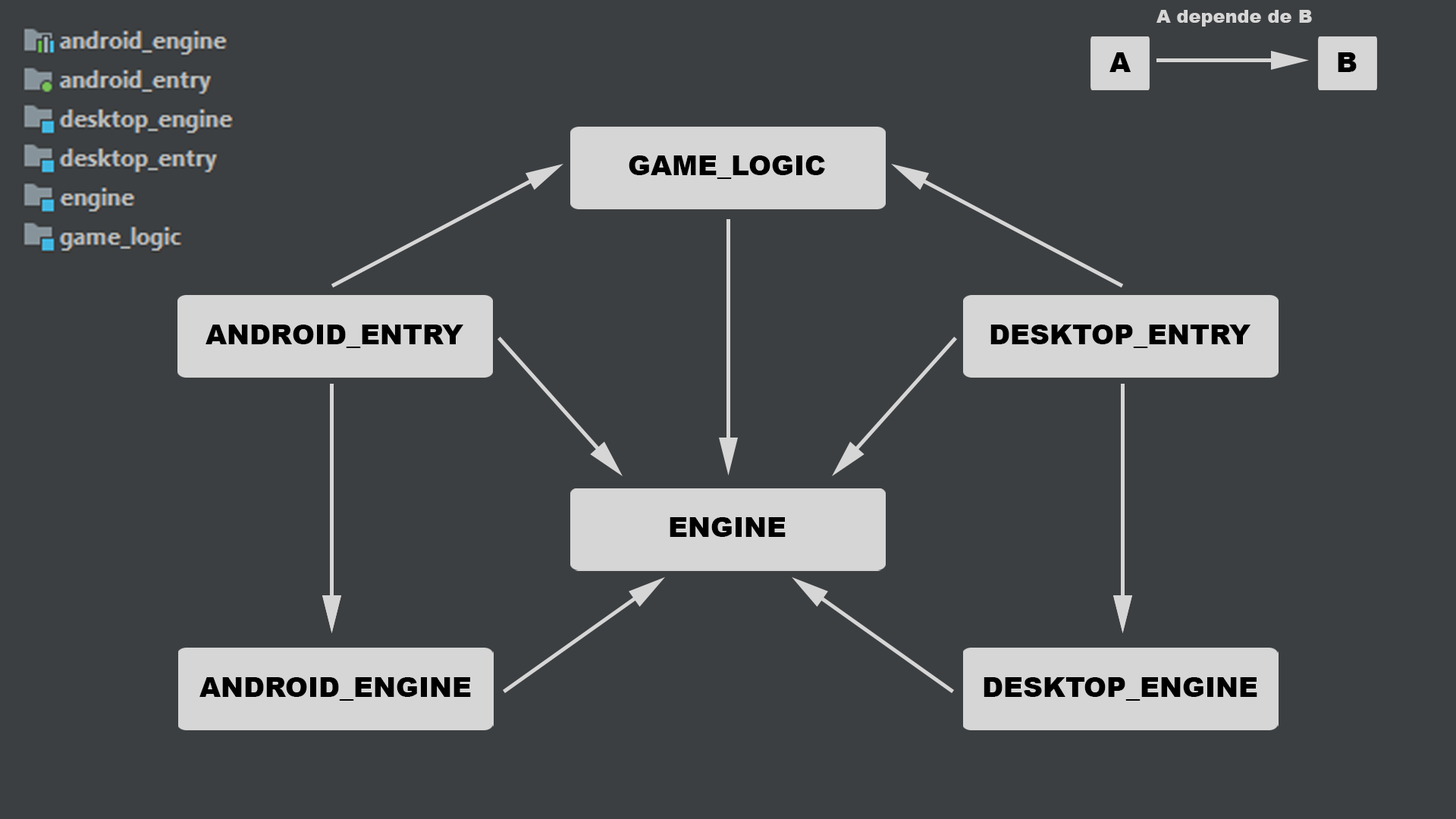
<style>
.page{position:relative;width:1456px;height:819px;background:#3c3f41}
.page>*{position:absolute;margin:0}
.t1{font:18.2px "Arial-Black";color:#d6d6d6}
.t2{font:27.3px "Arial-Black";color:#000000}
</style>
<div class="page">
<p class="t1" style="left:1156px;top:10px;width:156px;height:17px">A depende de B</p>
<p class="t2" style="left:1109px;top:52px;width:22px;height:20px">A</p>
<p class="t2" style="left:1338px;top:52px;width:19px;height:20px">B</p>
<p class="t2" style="left:629px;top:155px;width:196px;height:24px">GAME_LOGIC</p>
<p class="t2" style="left:206px;top:325px;width:257px;height:23px">ANDROID_ENTRY</p>
<p class="t2" style="left:990px;top:325px;width:260px;height:23px">DESKTOP_ENTRY</p>
<p class="t2" style="left:670px;top:517px;width:116px;height:20px">ENGINE</p>
<p class="t2" style="left:199px;top:677px;width:272px;height:24px">ANDROID_ENGINE</p>
<p class="t2" style="left:984px;top:677px;width:273px;height:24px">DESKTOP_ENGINE</p>
</div>
